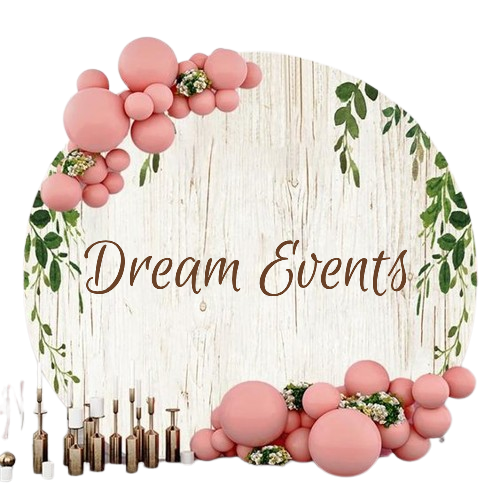
<style>
.page{position:relative;width:500px;height:500px;background:#ffffff}
.page>*{position:absolute;margin:0}
.t1{font:75px "EuphoriaScript-Regular";color:#694127}
</style>
<div class="page">
<p class="t1" style="left:84px;top:239px;width:323px;height:58px">Dream Events</p>
</div>
